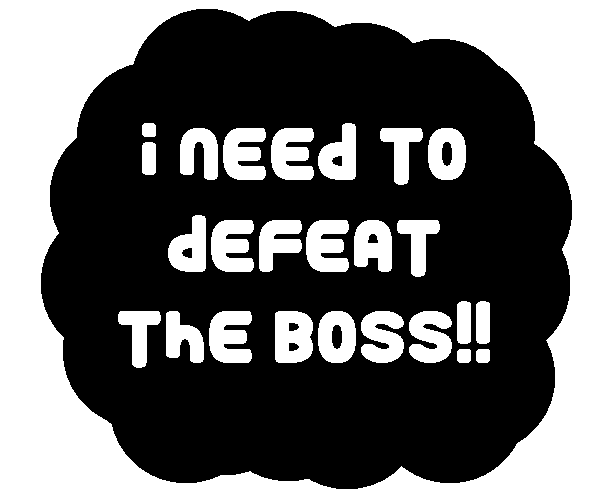
<style>
.page{position:relative;width:600px;height:500px;background:#000000}
.page>*{position:absolute;margin:0}
.t1{font:76.4px "RoundyRainbows";color:#ffffff}
</style>
<div class="page">
<p class="t1" style="left:118px;top:123px;width:372px;height:245px;text-align:center">I Need To defeat the boss!!</p>
</div>
